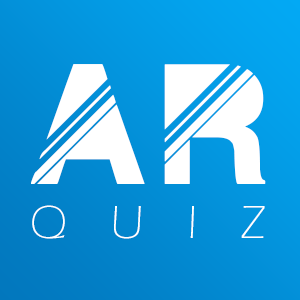
<style>
.page{position:relative;width:300px;height:300px}
.page>*{position:absolute;margin:0}
.t1{font:250px "DiscoNight";letter-spacing:0.1em;color:#ffffff}
.t2{font:48px "ErasITC-Light";letter-spacing:0.9em;color:#ffffff}
</style>
<div class="page">
<p class="t1" style="left:31px;top:64px;width:235px;height:120px">AR</p>
<p class="t2" style="left:32px;top:205px;width:233px;height:34px">QUIZ</p>
</div>
